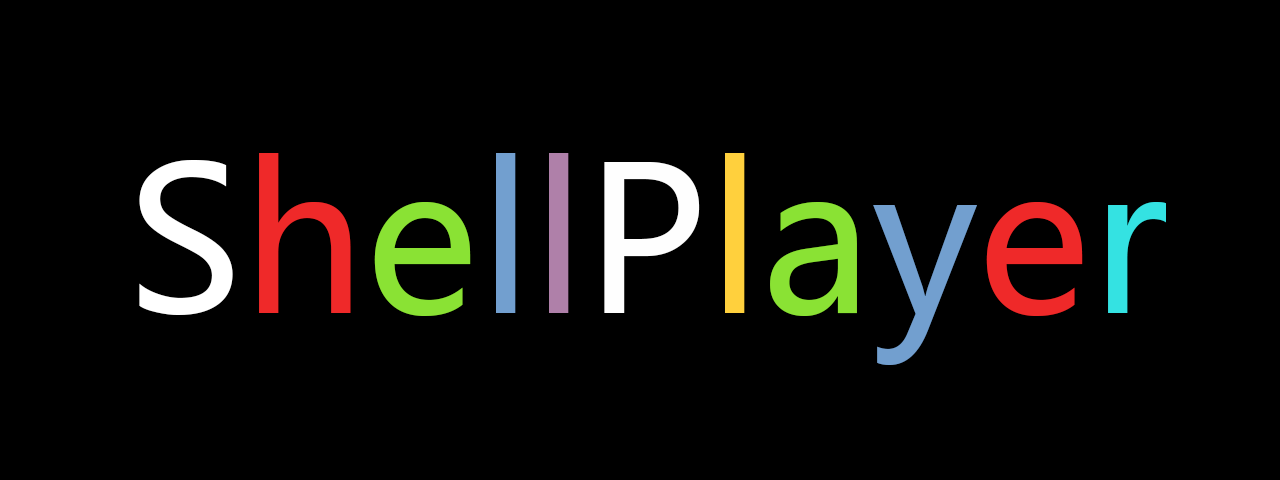
<style>
.page{position:relative;width:1280px;height:480px;background:#000000}
.page>*{position:absolute;margin:0}
.t1{font:200px "MicrosoftYaHei";color:#ffffff}
.t2{font:200px "MicrosoftYaHei";color:#ef2929}
.t3{font:200px "MicrosoftYaHei";color:#8ae234}
.t4{font:200px "MicrosoftYaHei";color:#729fcf}
.t5{font:200px "MicrosoftYaHei";color:#af80a9}
.t6{font:200px "MicrosoftYaHei";color:#fefefe}
.t7{font:200px "MicrosoftYaHei";color:#ffd03d}
.t8{font:200px "MicrosoftYaHei";color:#34e2e2}
</style>
<div class="page">
<p class="t1" style="left:139px;top:153px;width:1027px;height:212px">S<span class="t2">h</span><span class="t3">e</span><span class="t4">l</span><span class="t5">l</span><span class="t6">P</span><span class="t7">l</span><span class="t3">a</span><span class="t4">y</span><span class="t2">e</span><span class="t8">r</span></p>
</div>
